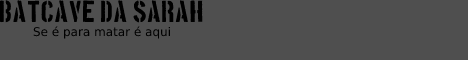
<style>
.page{position:relative;width:468px;height:60px;background:#4f4f4f}
.page>*{position:absolute;margin:0}
.t1{font:12px "DejaVuSans";color:#000000}
.t2{font:24px "BostonTraffic";color:#000000}
</style>
<div class="page">
<p class="t1" style="left:0px;top:0px;width:203px;height:39px;text-align:center"><span class="t2">Batcave da Sarah<br></span>Se é para matar é aqui</p>
</div>
